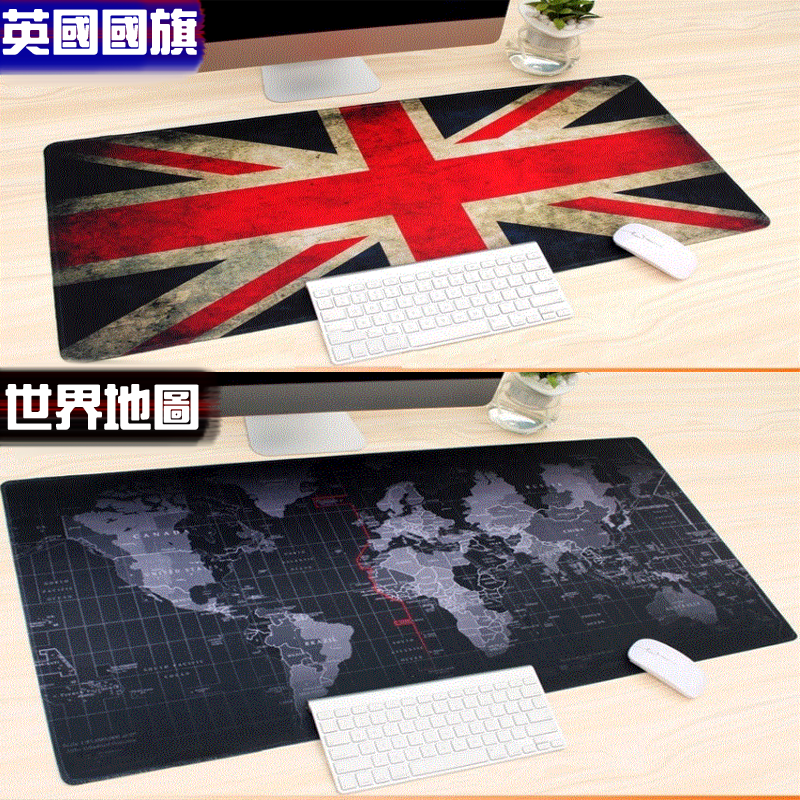
<style>
.page{position:relative;width:800px;height:800px}
.page>*{position:absolute;margin:0}
.t1{font:48px "HanWangZonYi";color:#ffffff;font-weight:bold}
</style>
<div class="page">
<p class="t1" style="left:2px;top:8px;width:195px;height:47px">英國國旗</p>
<p class="t1" style="left:5px;top:384px;width:194px;height:46px">世界地圖</p>
</div>
